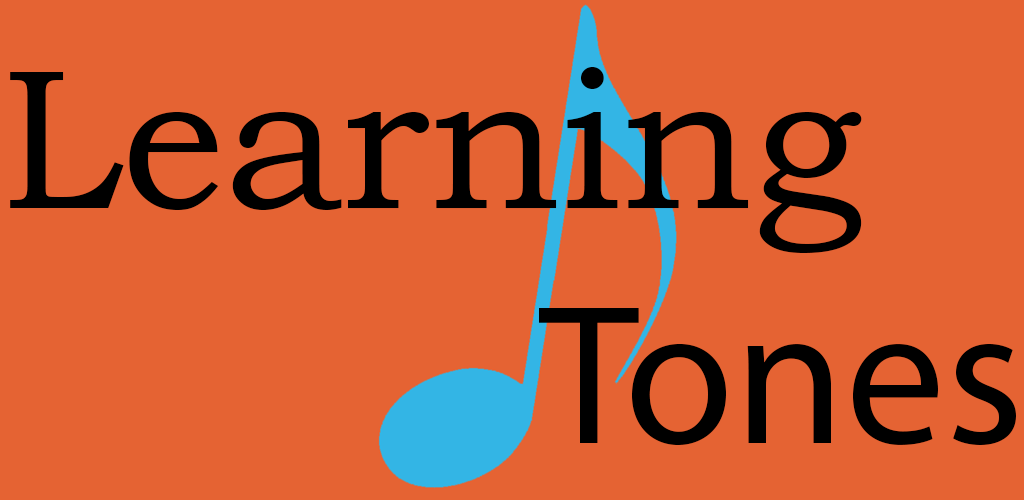
<style>
.page{position:relative;width:1024px;height:500px;background:#e56333}
.page>*{position:absolute;margin:0}
.t1{font:200px "BookmanOldStyle";color:#000000}
.t2{font:200px "MyriadPro-Regular";color:#000000}
</style>
<div class="page">
<p class="t1" style="left:10px;top:67px;width:852px;height:186px">Learning</p>
<p class="t2" style="left:539px;top:308px;width:477px;height:137px">Tones</p>
</div>
